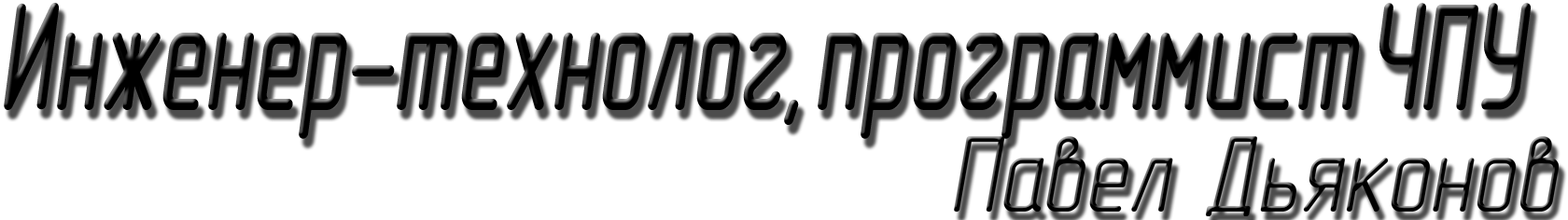
<style>
.page{position:relative;width:1568px;height:220px;background:#ffffff}
.page>*{position:absolute;margin:0}
.t1{font:149.3px "GOSTTypeA";color:#000000;font-weight:bold;font-style:italic;scale:0.75 1}
</style>
<div class="page">
<p class="t1" style="left:4px;top:3px;width:1527px;height:136px">Инженер-технолог, программист ЧПУ</p>
</div>
